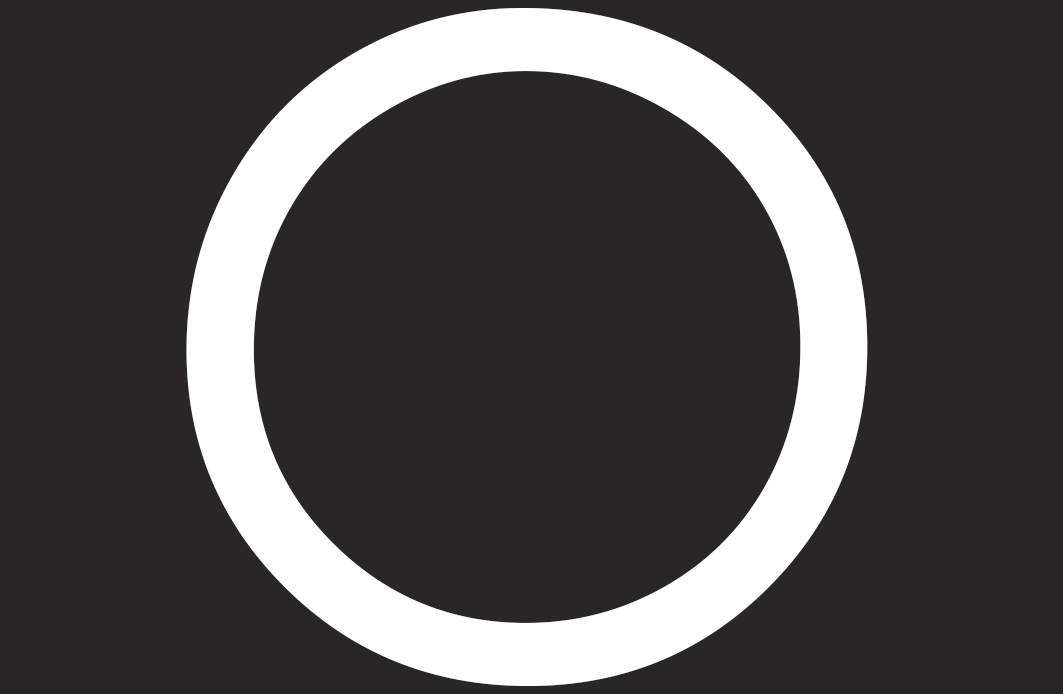
<style>
.page{position:relative;width:1063px;height:694px;background:#292726}
.page>*{position:absolute;margin:0}
.t1{font:900px "CenturyGothic";color:#ffffff}
</style>
<div class="page">
<p class="t1" style="left:186px;top:8px;width:682px;height:678px">O</p>
</div>
